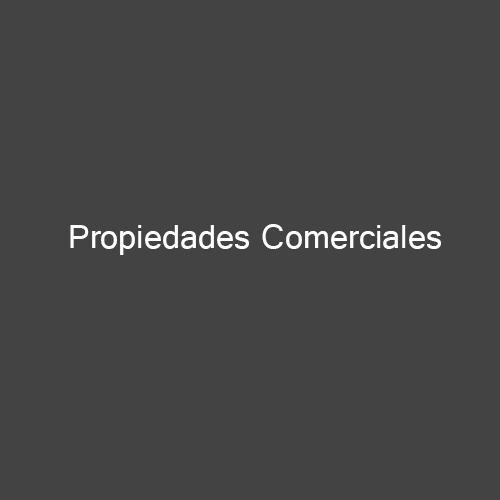
<style>
.page{position:relative;width:500px;height:500px;background:#434343}
.page>*{position:absolute;margin:0}
.t1{font:36px "Raavi";color:#ffffff}
</style>
<div class="page">
<p class="t1" style="left:70px;top:224px;width:371px;height:31px">Propiedades Comerciales</p>
</div>
